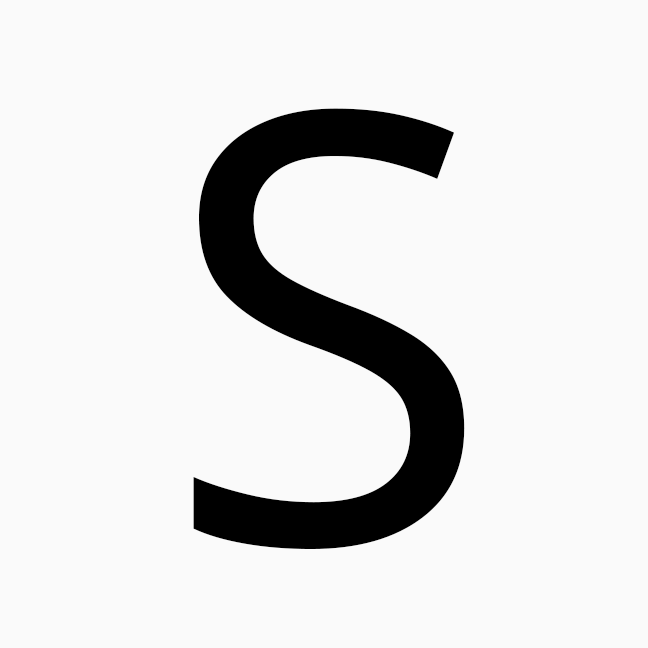
<style>
.page{position:relative;width:648px;height:648px;background:#fafafa}
.page>*{position:absolute;margin:0}
.t1{font:600px "NotoSans-Regular";letter-spacing:0.12em;color:#000000}
</style>
<div class="page">
<p class="t1" style="left:193px;top:108px;width:272px;height:441px">S</p>
</div>
